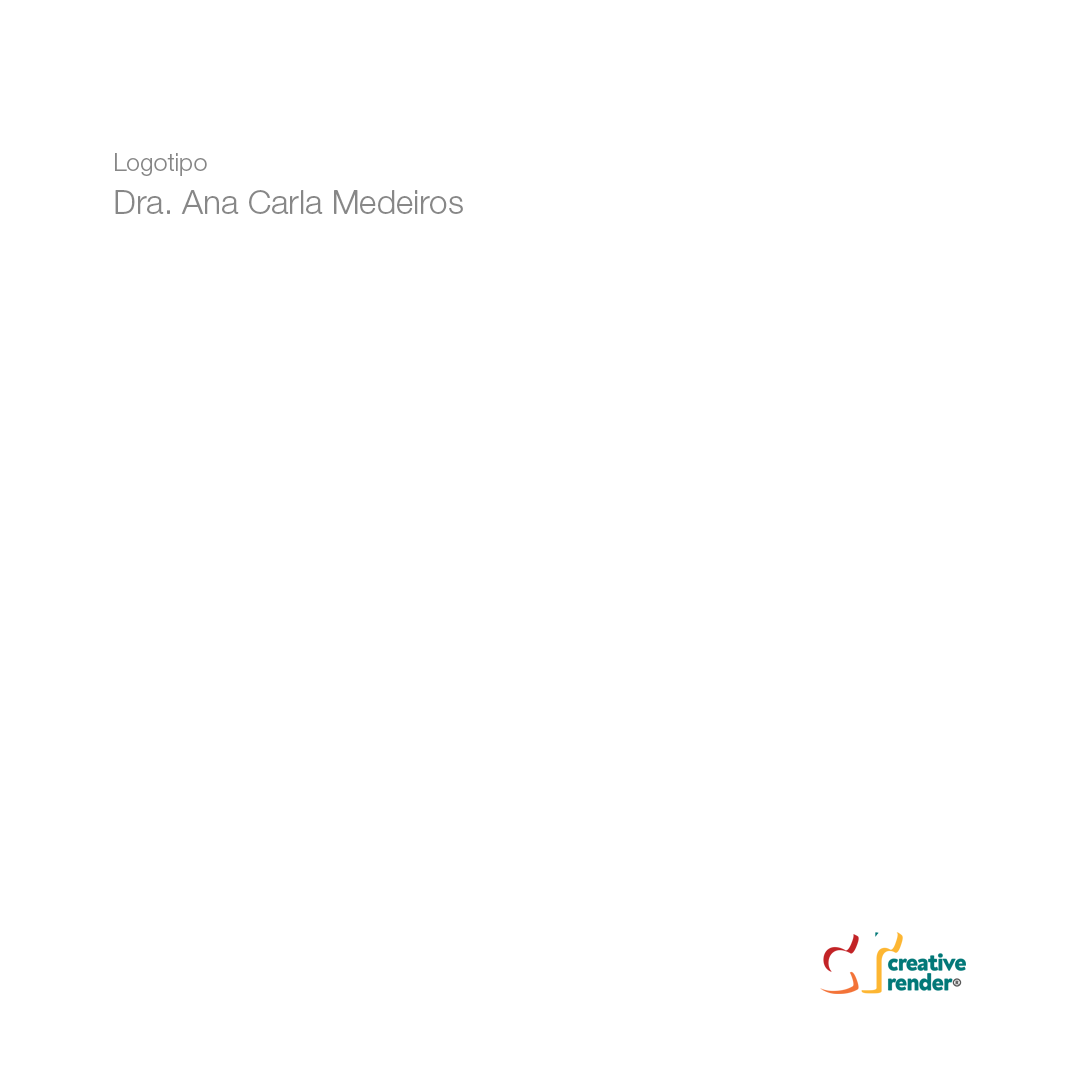
<style>
.page{position:relative;width:1080px;height:1080px;background:#ffffff}
.page>*{position:absolute;margin:0}
.t1{font:33.3px/43.2px "HelveticaNeueLTPro-Lt";color:#878787}
.t2{font:24.7px/43.2px "HelveticaNeueLTPro-Lt";color:#878787}
</style>
<div class="page">
<p class="t1" style="left:115px;top:153px;width:348px;height:61px"><span class="t2">Logotipo<br></span>Dra. Ana Carla Medeiros</p>
</div>
